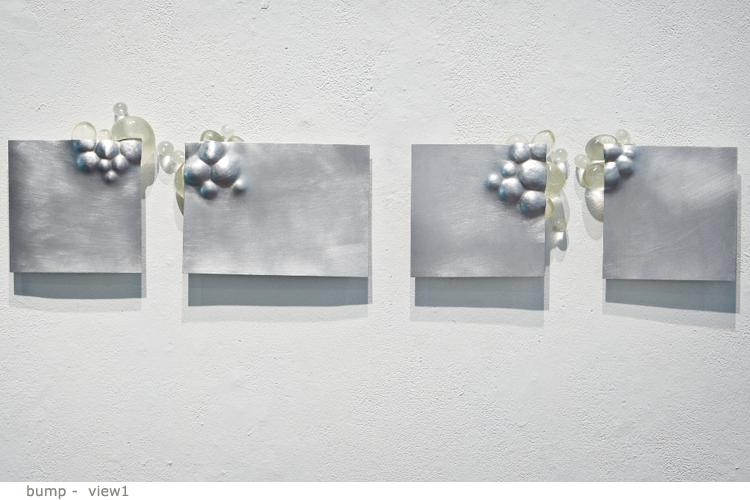
<style>
.page{position:relative;width:750px;height:500px}
.page>*{position:absolute;margin:0}
.t1{font:14px "Verdana";letter-spacing:0.01em;color:#898a7d}
</style>
<div class="page">
<p class="t1" style="left:27px;top:485px;width:102px;height:14px">bump -  view1</p>
</div>
